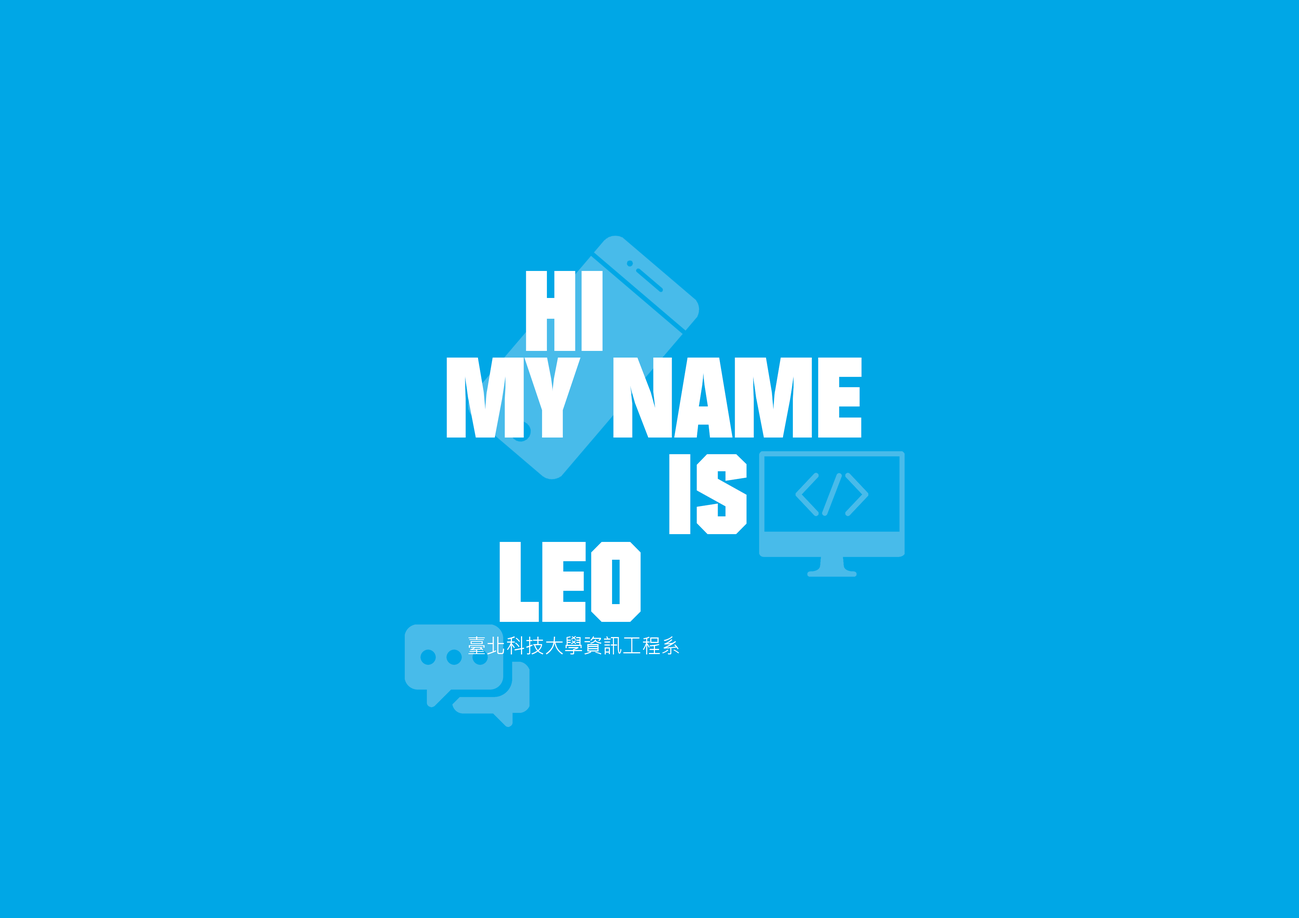
<style>
.page{position:relative;width:1299px;height:918px;background:#00a7e6}
.page>*{position:absolute;margin:0}
.t1{font:111.1px "Autumn";color:#ffffff}
.t2{font:20.5px "MicrosoftJhengHeiUIRegular";color:#ffffff;scale:0.95 1}
</style>
<div class="page">
<p class="t1" style="left:526px;top:271px;width:77px;height:80px">HI</p>
<p class="t1" style="left:446px;top:358px;width:416px;height:80px">MY NAME</p>
<p class="t1" style="left:669px;top:454px;width:77px;height:80px">IS</p>
<p class="t1" style="left:499px;top:542px;width:141px;height:80px">LEO</p>
<p class="t2" style="left:468px;top:636px;width:211px;height:19px">臺北科技大學資訊工程系</p>
</div>
